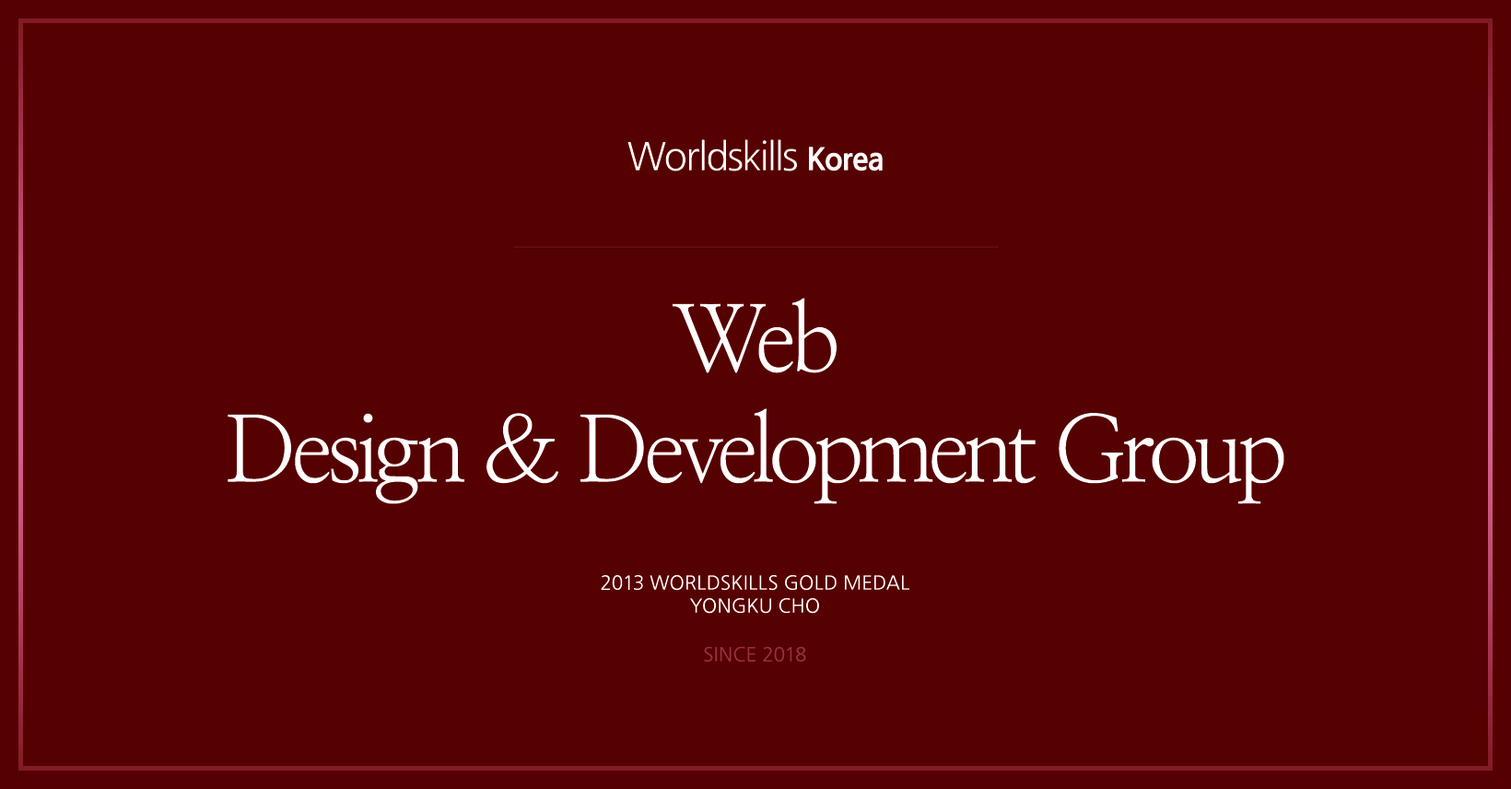
<style>
.page{position:relative;width:1511px;height:789px;background:#550101}
.page>*{position:absolute;margin:0}
.t1{font:38.4px "NanumGothic";letter-spacing:-0.03em;color:#ffffff}
.t2{font:30.7px "NanumGothicExtraBold";letter-spacing:-0.03em;color:#ffffff}
.t3{font:92.1px "NanumMyeongjo";letter-spacing:-0.065em;color:#ffffff}
.t4{font:19.2px "NanumGothic";color:#ffffff;text-transform:uppercase}
.t5{font:19.2px "NanumGothic";color:#963242;text-transform:uppercase}
</style>
<div class="page">
<p class="t1" style="left:628px;top:139px;width:255px;height:32px">Worldskills <span class="t2">Korea</span></p>
<p class="t3" style="left:228px;top:298px;width:1057px;height:206px;text-align:center">Web<br>Design &amp; Development Group</p>
<p class="t4" style="left:601px;top:574px;width:309px;height:40px;text-align:center">2013 worldskills gold medal<br>Yongku cho</p>
<p class="t5" style="left:704px;top:646px;width:102px;height:16px">Since 2018</p>
</div>
